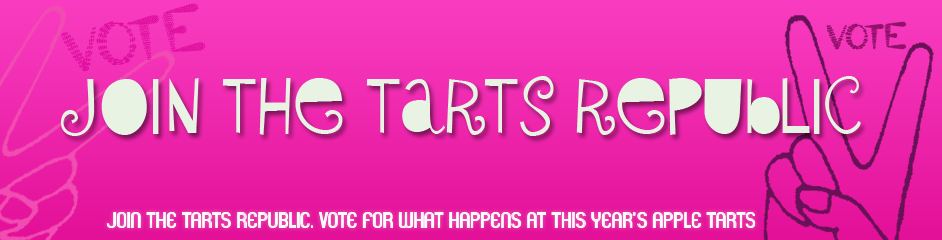
<style>
.page{position:relative;width:942px;height:240px}
.page>*{position:absolute;margin:0}
.t1{font:60px "LittleAnt";color:#dd0d9d}
.t2{font:34.2px "LittleAnt";color:#91106a}
.t3{font:70px "SybilGreen-Regular";color:#e8f3e4}
.t4{font:20px "Mexcellent-Regular";color:#fbfcfb}
</style>
<div class="page">
<p class="t1" style="left:61px;top:3px;width:145px;height:69px;rotate:-10deg">Vote</p>
<p class="t2" style="left:826px;top:21px;width:80px;height:29px">Vote</p>
<p class="t3" style="left:60px;top:76px;width:801px;height:60px">Join the tarts republic</p>
<p class="t4" style="left:106px;top:212px;width:650px;height:16px">Join The Tarts Republic. Vote For What Happens At This Year's Apple Tarts</p>
</div>
